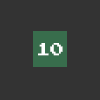
<style>
.page{position:relative;width:100px;height:100px;background:#333333}
.page>*{position:absolute;margin:0}
.t1{font:14px "PressStart2P-Regular";color:#ffffff}
</style>
<div class="page">
<p class="t1" style="left:38px;top:43px;width:25px;height:13px">10</p>
</div>
